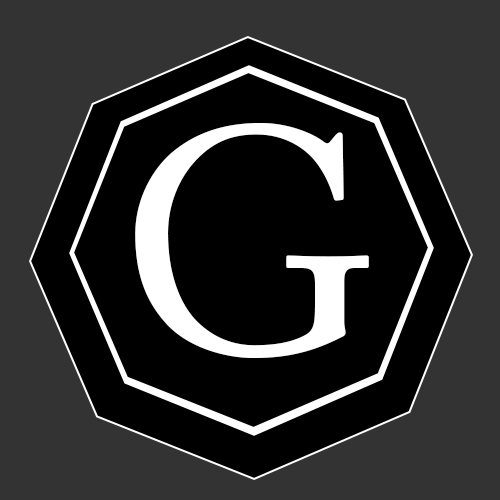
<style>
.page{position:relative;width:500px;height:500px;background:#000000}
.page>*{position:absolute;margin:0}
.t1{font:318.2px "ACaslonPro-Regular";color:#ffffff}
</style>
<div class="page">
<p class="t1" style="left:135px;top:122px;width:234px;height:236px">G</p>
</div>
